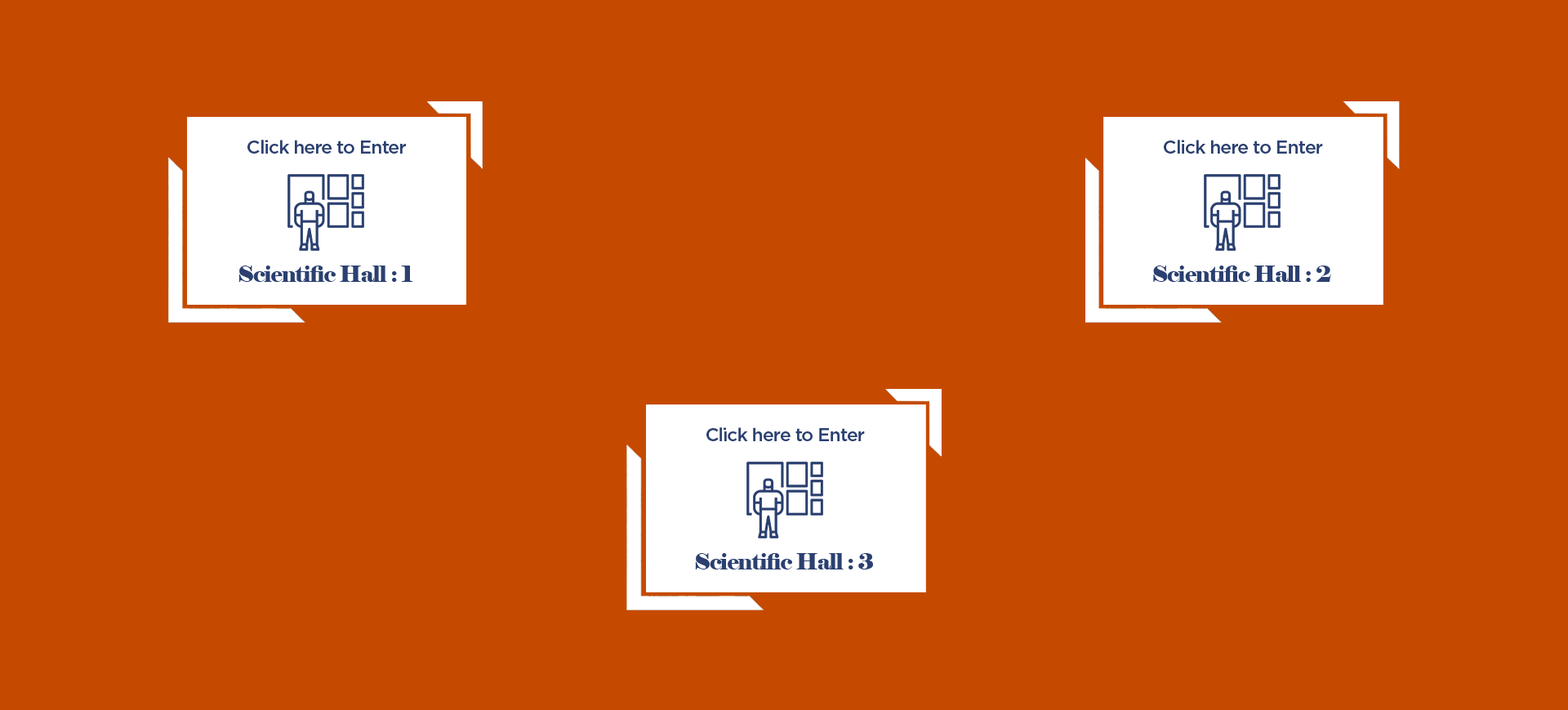
<style>
.page{position:relative;width:1568px;height:710px;background:#c54a00}
.page>*{position:absolute;margin:0}
.t1{font:18.6px "Gotham-Medium";letter-spacing:-0.04em;color:#2b4070}
.t2{font:22.3px "Elephant-Regular";letter-spacing:-0.04em;color:#2b4070}
</style>
<div class="page">
<p class="t1" style="left:247px;top:140px;width:159px;height:14px">Click here to Enter</p>
<p class="t1" style="left:1164px;top:140px;width:159px;height:14px">Click here to Enter</p>
<p class="t2" style="left:238px;top:265px;width:174px;height:17px">Scientific Hall : 1</p>
<p class="t2" style="left:1153px;top:265px;width:178px;height:17px">Scientific Hall : 2</p>
<p class="t1" style="left:706px;top:427px;width:159px;height:14px">Click here to Enter</p>
<p class="t2" style="left:695px;top:553px;width:178px;height:16px">Scientific Hall : 3</p>
</div>
